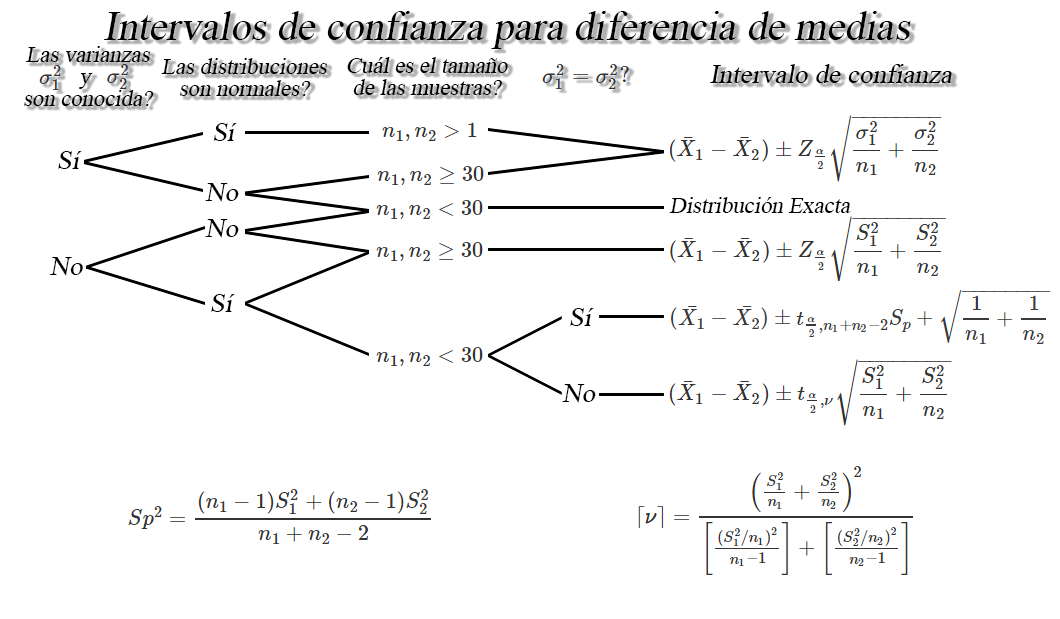
<style>
.page{position:relative;width:1060px;height:619px;background:#ffffff}
.page>*{position:absolute;margin:0}
.t1{font:30.5px "TimesNewRomanPSMT";color:#000000;font-style:italic}
.t2{font:17px/21.7px "TimesNewRomanPSMT";color:#000000;font-style:italic}
.t3{font:20.4px "TimesNewRomanPSMT";color:#000000;font-style:italic}
.t4{font:26.7px "TimesNewRomanPSMT";color:#000000;font-style:italic}
.t5{font:17px "TimesNewRomanPSMT";color:#000000;font-style:italic}
</style>
<div class="page">
<p class="t1" style="left:104px;top:11px;width:807px;height:38px">Intervalos de confianza para diferencia de medias</p>
<p class="t2" style="left:24px;top:46px;width:130px;height:60px;text-align:center">Las varianzas<br>     y      <br>son conocida?</p>
<p class="t2" style="left:161px;top:58px;width:166px;height:38px;text-align:center">Las distribuciones<br>son normales?</p>
<p class="t2" style="left:347px;top:57px;width:161px;height:38px;text-align:center">Cuál es el tamaño<br>de las muestras?</p>
<p class="t3" style="left:710px;top:64px;width:243px;height:19px">Intervalo de confianza</p>
<p class="t4" style="left:213px;top:123px;width:24px;height:18px">Sí</p>
<p class="t4" style="left:58px;top:151px;width:24px;height:18px">Sí</p>
<p class="t4" style="left:205px;top:183px;width:34px;height:19px">No</p>
<p class="t5" style="left:669px;top:197px;width:182px;height:16px">Distribución Exacta</p>
<p class="t4" style="left:205px;top:219px;width:34px;height:19px">No</p>
<p class="t4" style="left:50px;top:257px;width:33px;height:19px">No</p>
<p class="t4" style="left:211px;top:294px;width:24px;height:18px">Sí</p>
<p class="t4" style="left:570px;top:308px;width:24px;height:18px">Sí</p>
<p class="t4" style="left:562px;top:384px;width:34px;height:19px">No</p>
</div>
